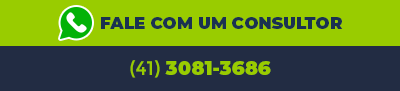
<style>
.page{position:relative;width:400px;height:91px;background:#222c43}
.page>*{position:absolute;margin:0}
.t1{font:16.7px "Montserrat-Black";color:#1a3151;text-transform:uppercase}
.t2{font:19.5px "Montserrat-Black";color:#99cc00}
.t3{font:19.5px "Montserrat-Regular";color:#99cc00}
</style>
<div class="page">
<p class="t1" style="left:101px;top:17px;width:242px;height:12px">fale com um consultor</p>
<p class="t2" style="left:130px;top:60px;width:141px;height:18px"><span class="t3">(41) </span>3081-3686</p>
</div>
